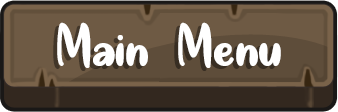
<style>
.page{position:relative;width:338px;height:112px;background:#6e5a44}
.page>*{position:absolute;margin:0}
.t1{font:70px "QuiteMagical-Regular";color:#ffffff}
</style>
<div class="page">
<p class="t1" style="left:57px;top:22px;width:224px;height:46px">Main Menu</p>
</div>
